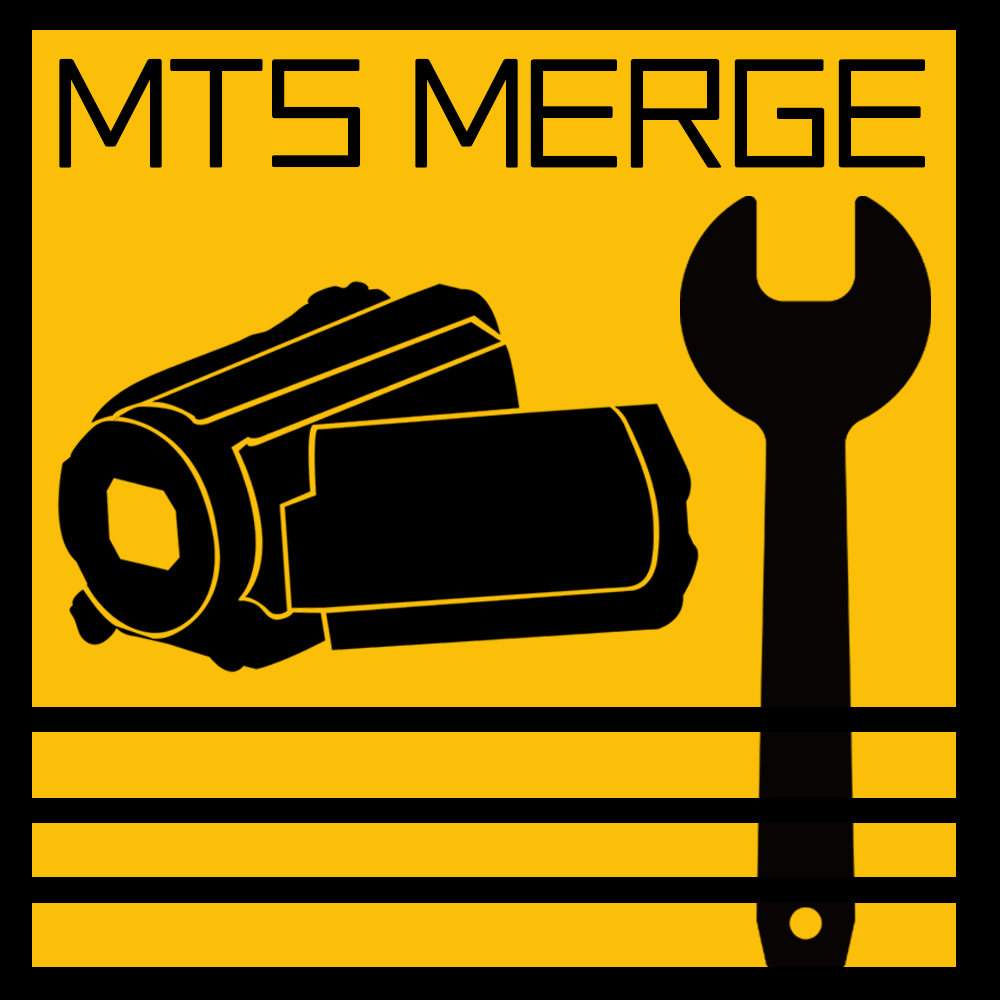
<style>
.page{position:relative;width:1000px;height:1000px;background:#fbbf09}
.page>*{position:absolute;margin:0}
.t1{font:129.8px "VDL-LineGR-Regular";color:#000000}
</style>
<div class="page">
<p class="t1" style="left:59px;top:58px;width:866px;height:110px">MTS MERGE</p>
</div>
